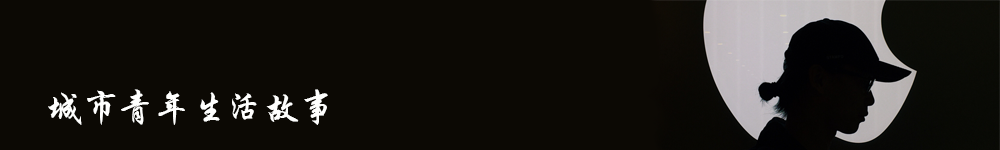
<style>
.page{position:relative;width:1000px;height:150px;background:#0c0904}
.page>*{position:absolute;margin:0}
.t1{font:36px "STXingkai";color:#fffffe}
</style>
<div class="page">
<p class="t1" style="left:48px;top:89px;width:280px;height:36px">城市青年生活故事</p>
</div>
